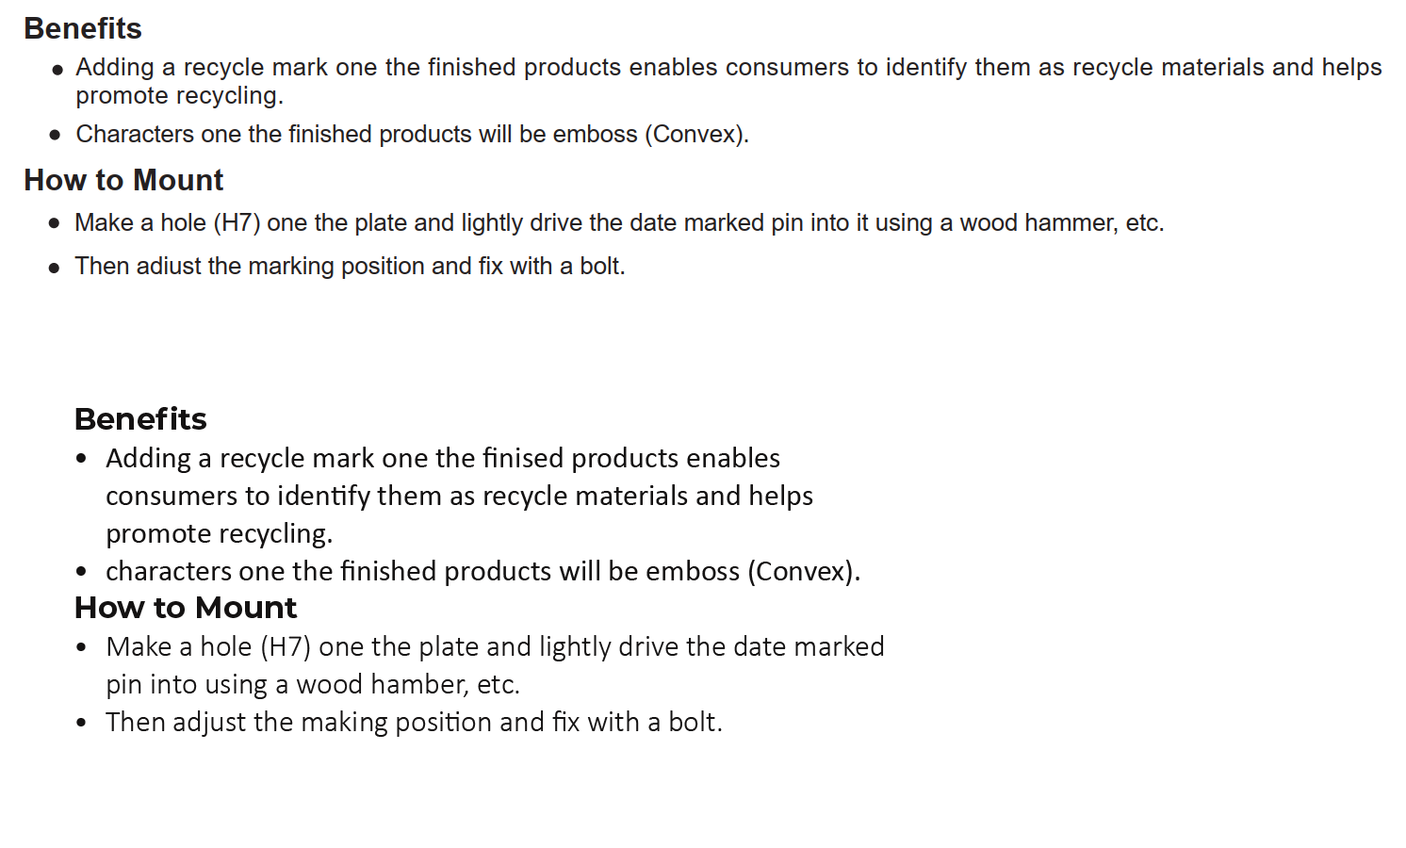
<style>
.page{position:relative;width:1406px;height:848px;background:#ffffff}
.page>*{position:absolute;margin:0}
.t1{font:30.2px/37.7px "Calibri";color:#141212}
.t2{font:30.2px/37.7px "Montserrat-Bold";color:#141212}
.t3{font:30.2px/37.7px "Calibri-Light";color:#141212}
</style>
<div class="page">
<p class="t1" style="left:75px;top:406px;width:809px;height:331px"><span class="t2">Benefits<br></span>Adding a recycle mark one the finised products enables consumers to identify them as recycle materials and helps promote recycling.<br>characters one the finished products will be emboss (Convex).<br><span class="t2">How to Mount<br></span><span class="t3">Make a hole (H7) one the plate and lightly drive the date marked pin into using a wood hamber, etc.<br>Then adjust the making position and fix with a bolt.</span></p>
</div>
